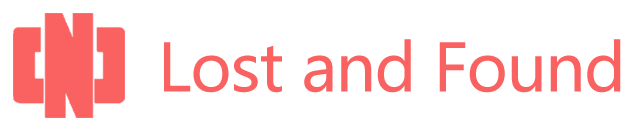
<style>
.page{position:relative;width:634px;height:131px;background:#ffffff}
.page>*{position:absolute;margin:0}
.t1{font:65.3px "MicrosoftYaHei";letter-spacing:-0.01em;color:#fa6161}
</style>
<div class="page">
<p class="t1" style="left:164px;top:39px;width:457px;height:54px">Lost and Found</p>
</div>
